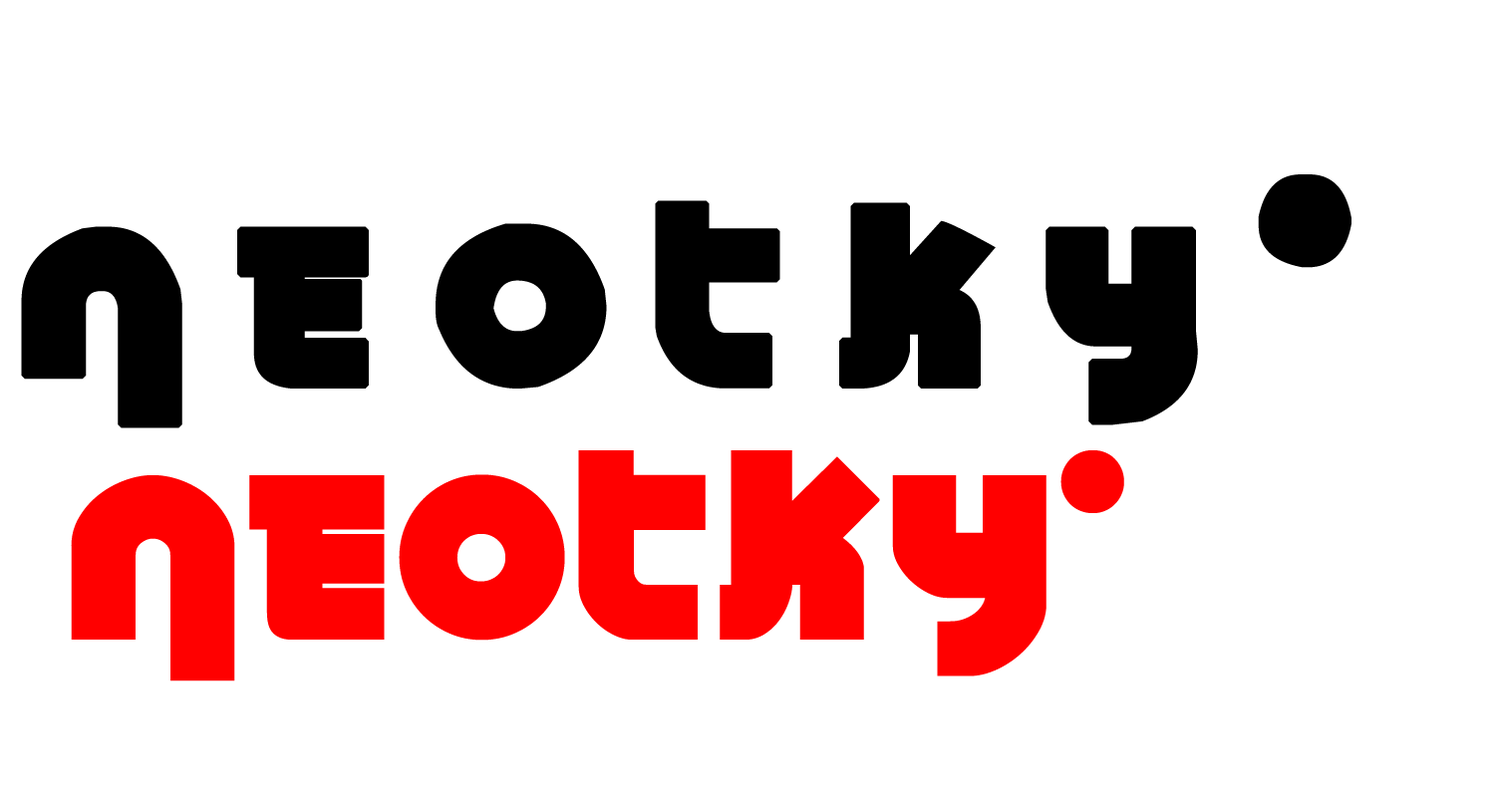
<style>
.page{position:relative;width:1495px;height:797px;background:#ffffff}
.page>*{position:absolute;margin:0}
.t1{font:270px "neotokyo_press_N";color:#000000}
.t2{font:249.2px "Neotokyo";color:#ff0000}
</style>
<div class="page">
<p class="t1" style="left:21px;top:174px;width:1331px;height:255px">n e o t k y c</p>
<p class="t2" style="left:71px;top:451px;width:1053px;height:231px">neotky’</p>
</div>
